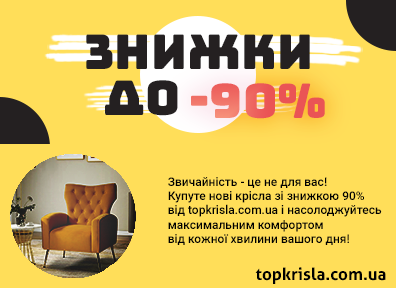
<style>
.page{position:relative;width:396px;height:288px;background:#ffde59}
.page>*{position:absolute;margin:0}
.t1{font:48px "Harpseal";color:#242021}
.t2{font:48px "Harpseal";color:#ec5d5a}
.t3{font:12px "Roboto-Medium";color:#000000}
.t4{font:17px "Aller-Bold";color:#000000}
</style>
<div class="page">
<p class="t1" style="left:86px;top:34px;width:224px;height:35px">Знижки</p>
<p class="t1" style="left:105px;top:80px;width:73px;height:36px">до</p>
<p class="t2" style="left:191px;top:83px;width:134px;height:36px">-90%</p>
<p class="t3" style="left:168px;top:177px;width:214px;height:68px">Звичайність - це не для вас!<br>Купуте нові крісла зі знижкою 90%<br>від topkrisla.com.ua і насолоджуйтесь<br>максимальним комфортом<br>від кожної хвилини вашого дня!</p>
<p class="t4" style="left:255px;top:267px;width:131px;height:17px">topkrisla.com.ua</p>
</div>
